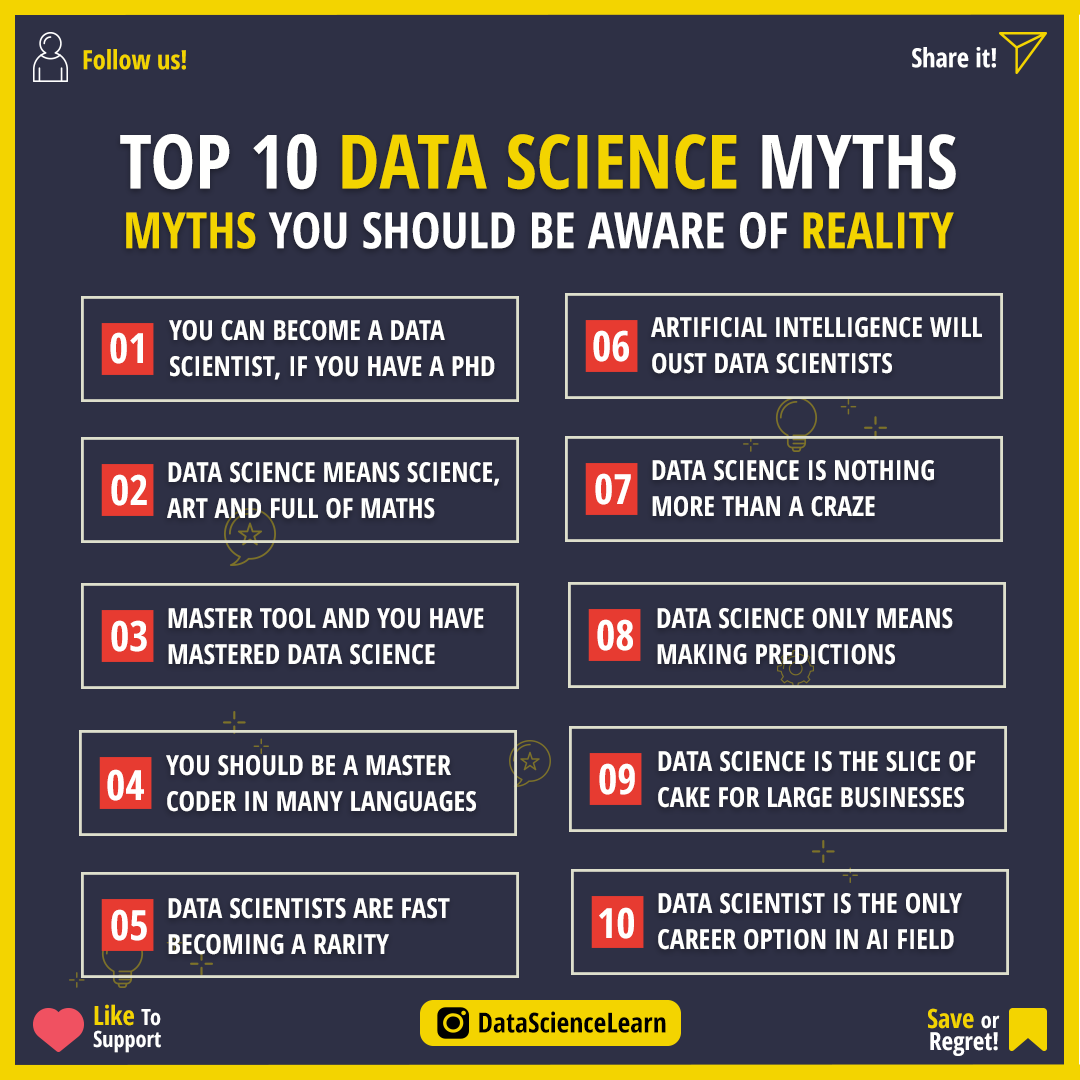
<style>
.page{position:relative;width:1080px;height:1080px;background:#2e3045}
.page>*{position:absolute;margin:0}
.t1{font:26.4px "OpenSans-CondensedBold";color:#f3d400}
.t2{font:26.4px "OpenSans-CondensedBold";color:#ffffff}
.t3{font:50px/59.7px "OpenSans-CondensedBold";color:#ffffff}
.t4{font:75px/59.7px "OpenSans-CondensedBold";color:#fffffe}
.t5{font:75px/59.7px "OpenSans-CondensedBold";color:#f3d400}
.t6{font:50px/59.7px "OpenSans-CondensedBold";color:#f3d400}
.t7{font:27.8px/36.1px "OpenSans-CondensedBold";color:#fffffe}
.t8{font:41.7px "OpenSans-CondensedBold";color:#fffffe}
.t9{font:22.2px/22.2px "OpenSans-CondensedBold";color:#ffffff}
.t10{font:26.4px/22.2px "OpenSans-CondensedBold";color:#f3d400}
.t11{font:27.8px "OpenSans-CondensedBold";color:#000000}
.t12{font:25px/22.2px "OpenSans-CondensedBold";color:#ffffff}
</style>
<div class="page">
<p class="t1" style="left:83px;top:49px;width:103px;height:21px">Follow us!</p>
<p class="t2" style="left:912px;top:47px;width:84px;height:21px">Share it!</p>
<p class="t3" style="left:120px;top:134px;width:836px;height:115px;text-align:center"><span class="t4">TOP 10 </span><span class="t5">DATA SCIENCE</span><span class="t4"> MYTHS<br></span><span class="t6">MYTHS </span>YOU SHOULD BE AWARE OF<span class="t6"> REALITY</span></p>
<p class="t7" style="left:651px;top:317px;width:331px;height:57px">ARTIFICIAL INTELLIGENCE WILL <br>OUST DATA SCIENTISTS</p>
<p class="t7" style="left:169px;top:320px;width:326px;height:60px">YOU CAN BECOME A DATA <br>SCIENTIST, IF YOU HAVE A PHD</p>
<p class="t8" style="left:110px;top:332px;width:33px;height:32px">01</p>
<p class="t8" style="left:593px;top:330px;width:36px;height:32px">06</p>
<p class="t7" style="left:167px;top:462px;width:332px;height:57px">DATA SCIENCE MEANS SCIENCE,<br>ART AND FULL OF MATHS</p>
<p class="t7" style="left:652px;top:460px;width:282px;height:57px">DATA SCIENCE IS NOTHING <br>MORE THAN A CRAZE</p>
<p class="t8" style="left:595px;top:473px;width:36px;height:32px">07</p>
<p class="t8" style="left:111px;top:474px;width:36px;height:32px">02</p>
<p class="t7" style="left:168px;top:608px;width:316px;height:57px">MASTER TOOL AND YOU HAVE <br>MASTERED DATA SCIENCE</p>
<p class="t7" style="left:657px;top:608px;width:296px;height:57px">DATA SCIENCE ONLY MEANS <br>MAKING PREDICTIONS</p>
<p class="t8" style="left:111px;top:620px;width:36px;height:32px">03</p>
<p class="t8" style="left:597px;top:619px;width:36px;height:32px">08</p>
<p class="t7" style="left:166px;top:755px;width:310px;height:57px">YOU SHOULD BE A MASTER <br>CODER IN MANY LANGUAGES</p>
<p class="t7" style="left:658px;top:751px;width:318px;height:57px">DATA SCIENCE IS THE SLICE OF <br>CAKE FOR LARGE BUSINESSES</p>
<p class="t8" style="left:107px;top:769px;width:37px;height:32px">04</p>
<p class="t8" style="left:599px;top:763px;width:36px;height:32px">09</p>
<p class="t7" style="left:658px;top:893px;width:304px;height:57px">DATA SCIENTIST IS THE ONLY <br>CAREER OPTION IN AI FIELD</p>
<p class="t7" style="left:168px;top:898px;width:282px;height:57px">DATA SCIENTISTS ARE FAST <br>BECOMING A RARITY</p>
<p class="t8" style="left:111px;top:909px;width:36px;height:32px">05</p>
<p class="t8" style="left:599px;top:907px;width:35px;height:32px">10</p>
<p class="t9" style="left:93px;top:1004px;width:68px;height:49px"><span class="t10">Like </span>To<br>Support</p>
<p class="t11" style="left:479px;top:1011px;width:187px;height:22px">DataScienceLearn</p>
<p class="t12" style="left:928px;top:1008px;width:72px;height:48px;text-align:right"><span class="t10">Save </span><span class="t9">or<br></span>Regret!</p>
</div>
